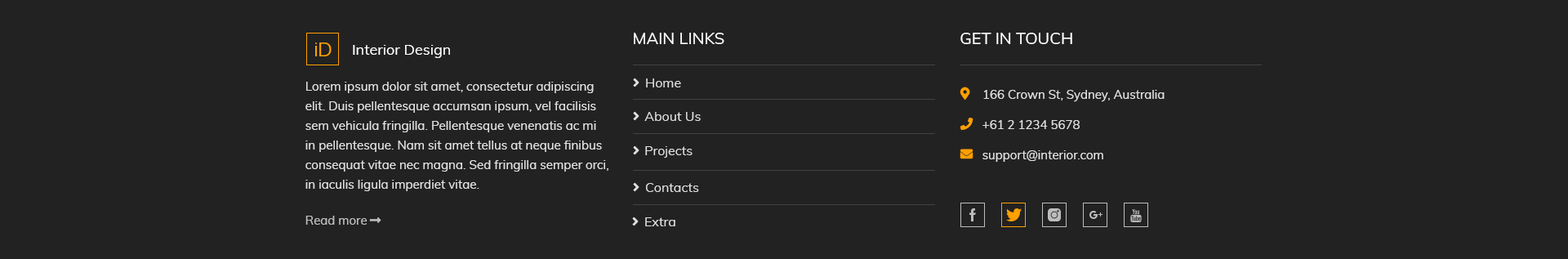
<style>
.page{position:relative;width:1568px;height:259px;background:#222222}
.page>*{position:absolute;margin:0}
.t1{font:16.3px "Muli-Regular";color:#ffffff;text-transform:uppercase}
.t2{font:19.6px "Muli-Regular";color:#ffa000}
.t3{font:14.7px "Muli-Regular";color:#ffffff}
.t4{font:12.2px/19.6px "Muli-Regular";color:#e0e0e0}
.t5{font:12.2px "Muli-Regular";color:#e0e0e0}
.t6{font:12px "Muli-Regular";color:#e0e0e0}
.t7{font:12.3px "Muli-Regular";color:#e0e0e0}
</style>
<div class="page">
<p class="t1" style="left:634px;top:33px;width:90px;height:11px">Main Links</p>
<p class="t1" style="left:960px;top:33px;width:112px;height:11px">GET IN TOUCH</p>
<p class="t2" style="left:319px;top:42px;width:13px;height:14px">D</p>
<p class="t3" style="left:353px;top:45px;width:97px;height:13px">Interior Design</p>
<p class="t4" style="left:305px;top:82px;width:303px;height:109px;text-align:right">Lorem ipsum dolor sit amet, consectetur adipiscing elit. Duis pellentesque accumsan ipsum, vel facilisis sem vehicula fringilla. Pellentesque venenatis ac mi in pellentesque. Nam sit amet tellus at neque finibus consequat vitae nec magna. Sed fringilla semper orci, in iaculis ligula imperdiet vitae.</p>
<p class="t5" style="left:983px;top:90px;width:182px;height:12px">166 Crown St, Sydney, Australia</p>
<p class="t6" style="left:982px;top:120px;width:98px;height:9px">+61 2 1234 5678</p>
<p class="t7" style="left:982px;top:150px;width:121px;height:12px">support@interior.com</p>
</div>
